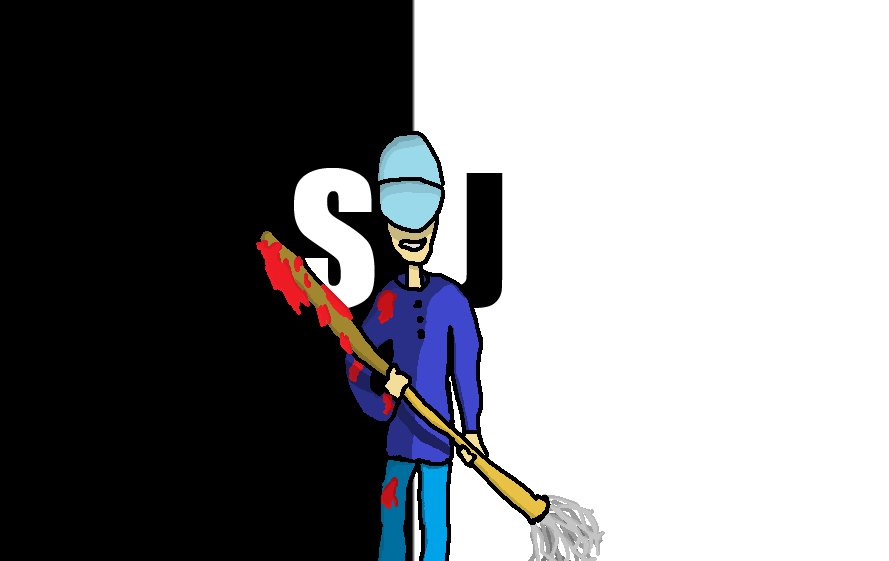
<style>
.page{position:relative;width:889px;height:561px;background:#ffffff}
.page>*{position:absolute;margin:0}
.t1{font:170.6px "Impact";color:#ffffff}
.t2{font:170.6px "Impact";color:#000000}
</style>
<div class="page">
<p class="t1" style="left:294px;top:168px;width:81px;height:141px">S</p>
<p class="t2" style="left:453px;top:173px;width:50px;height:135px">J</p>
</div>
